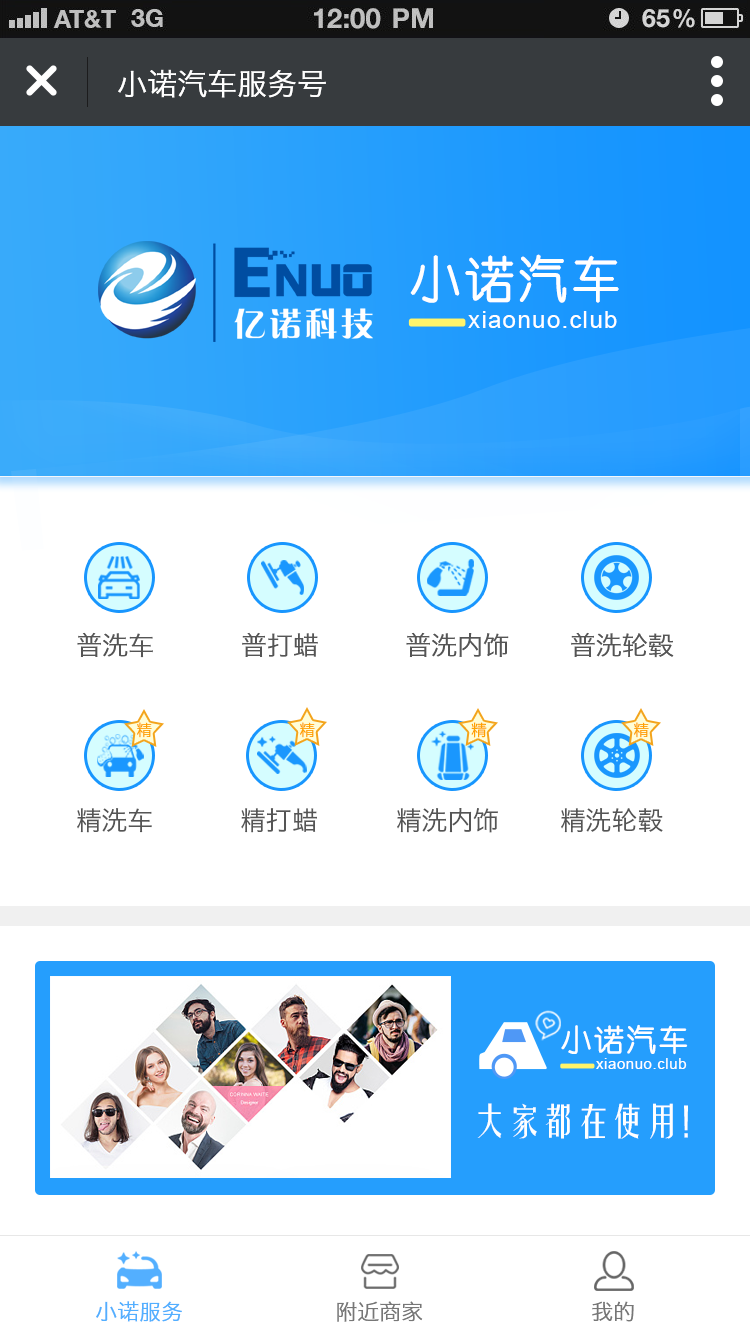
<style>
.page{position:relative;width:750px;height:1334px;background:#ffffff}
.page>*{position:absolute;margin:0}
.t1{font:30px "HiraginoSansGB-W3";color:#ffffff}
.t2{font:49.8px "YouYuan";letter-spacing:0.05em;color:#ffffff;font-weight:bold}
.t3{font:24.1px "ArialMT";letter-spacing:0.05em;color:#ffffff}
.t4{font:26px "HiraginoSansGB-W3";color:#555555}
.t5{font:16px "HiraginoSansGB-W3";color:#ffa101}
.t6{font:30.2px "YouYuan";letter-spacing:0.05em;color:#ffffff;font-weight:bold}
.t7{font:14.6px "ArialMT";letter-spacing:0.05em;color:#ffffff}
.t8{font:36px "FZYTK--GBK1-0";letter-spacing:-0.05em;color:#ffffff}
.t9{font:22px "HiraginoSansGB-W3";color:#53afff}
.t10{font:22px "HiraginoSansGB-W3";color:#777777}
</style>
<div class="page">
<p class="t1" style="left:118px;top:69px;width:208px;height:29px">小诺汽车服务号</p>
<p class="t2" style="left:410px;top:254px;width:209px;height:49px">小诺汽车</p>
<p class="t3" style="left:468px;top:311px;width:149px;height:17px">xiaonuo.club</p>
<p class="t4" style="left:77px;top:632px;width:597px;height:26px">普洗车          普打蜡          普洗内饰       普洗轮毂</p>
<p class="t5" style="left:137px;top:722px;width:15px;height:16px">精</p>
<p class="t5" style="left:300px;top:722px;width:15px;height:16px">精</p>
<p class="t5" style="left:471px;top:722px;width:16px;height:16px">精</p>
<p class="t5" style="left:634px;top:722px;width:15px;height:16px">精</p>
<p class="t4" style="left:77px;top:808px;width:586px;height:25px">精洗车          精打蜡         精洗内饰       精洗轮毂</p>
<p class="t6" style="left:561px;top:1024px;width:127px;height:31px">小诺汽车</p>
<p class="t7" style="left:596px;top:1058px;width:91px;height:11px">xiaonuo.club</p>
<p class="t8" style="left:477px;top:1103px;width:211px;height:36px">大家都在使用！</p>
<p class="t9" style="left:96px;top:1301px;width:86px;height:21px">小诺服务</p>
<p class="t10" style="left:337px;top:1301px;width:86px;height:21px">附近商家</p>
<p class="t10" style="left:592px;top:1301px;width:42px;height:21px">我的</p>
</div>
